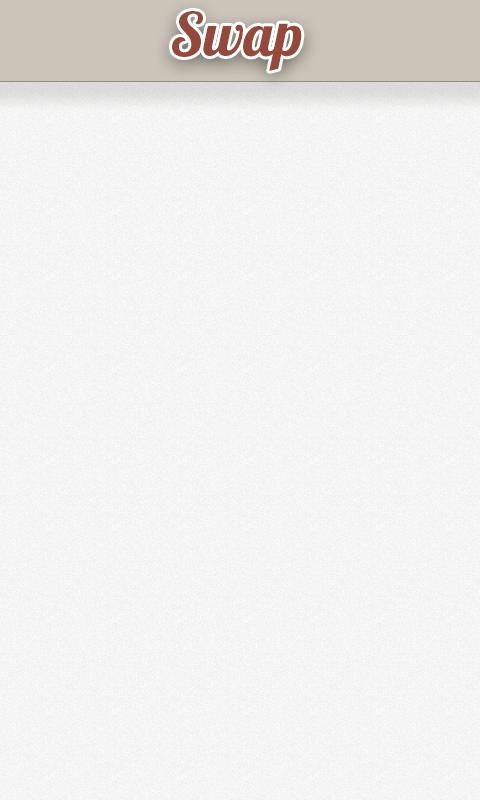
<style>
.page{position:relative;width:480px;height:800px}
.page>*{position:absolute;margin:0}
.t1{font:60px "Lobster1.4";color:#94493d}
</style>
<div class="page">
<p class="t1" style="left:172px;top:11px;width:130px;height:60px">Swap</p>
</div>
